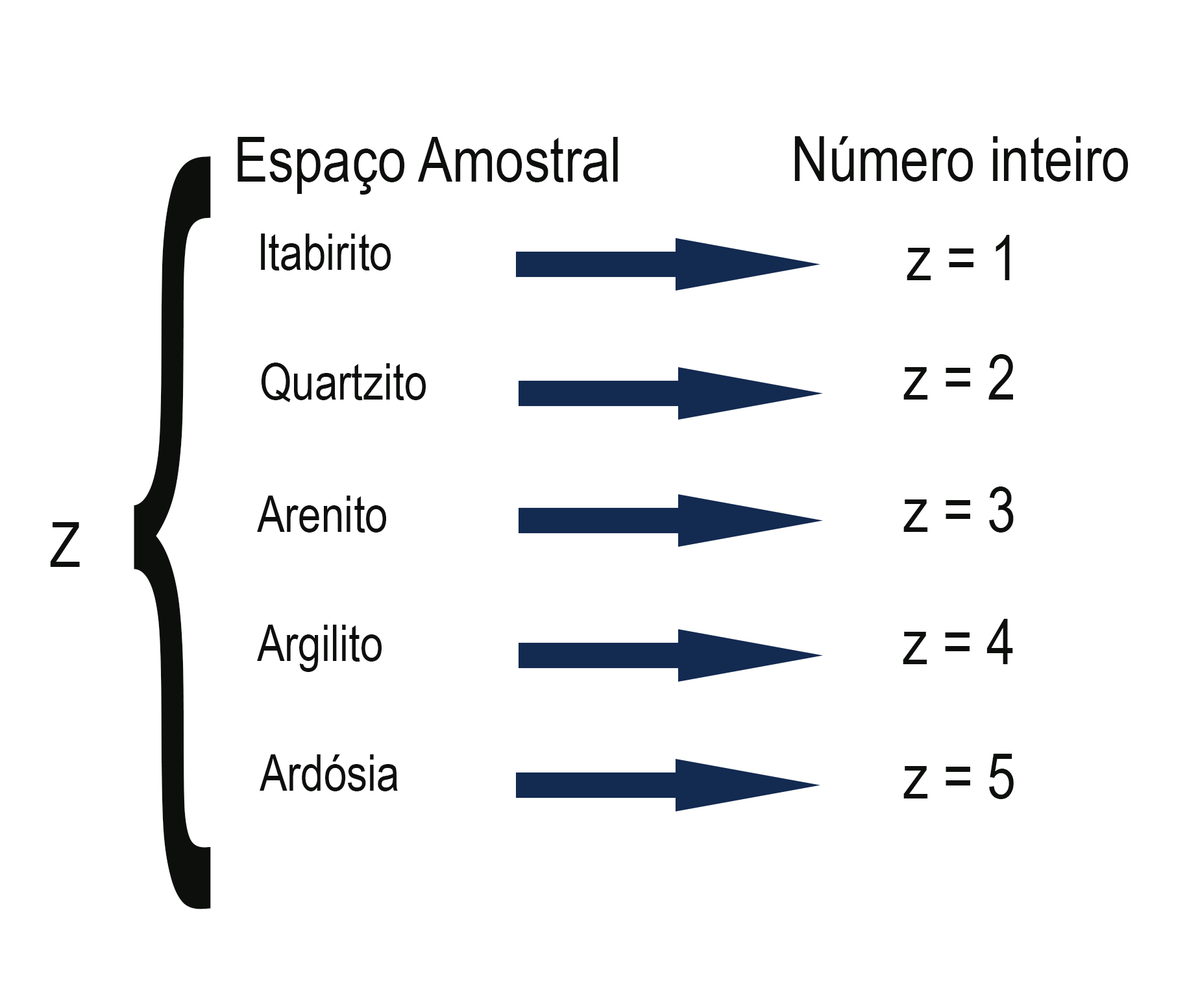
<style>
.page{position:relative;width:1198px;height:995px;background:#ffffff}
.page>*{position:absolute;margin:0}
.t1{font:108.2px "ArialNarrow";color:#0d0f0d}
.t2{font:1375.2px "ArialNarrow";color:#0d0f0d;scale:0.41 1}
.t3{font:86.5px "ArialNarrow";color:#0d0f0d}
</style>
<div class="page">
<p class="t1" style="left:238px;top:137px;width:380px;height:58px">Espaço Amostral</p>
<p class="t1" style="left:794px;top:136px;width:334px;height:46px">Número inteiro</p>
<p class="t2" style="left:134px;top:156px;width:77px;height:754px;rotate:-4deg">{</p>
<p class="t3" style="left:261px;top:234px;width:130px;height:37px">Itabirito</p>
<p class="t1" style="left:907px;top:235px;width:103px;height:45px">z = 1</p>
<p class="t3" style="left:261px;top:363px;width:165px;height:39px">Quartzito</p>
<p class="t1" style="left:903px;top:354px;width:110px;height:46px">z = 2</p>
<p class="t3" style="left:257px;top:496px;width:129px;height:37px">Arenito</p>
<p class="t1" style="left:903px;top:487px;width:111px;height:46px">z = 3</p>
<p class="t1" style="left:50px;top:522px;width:30px;height:45px">Z</p>
<p class="t3" style="left:257px;top:625px;width:125px;height:47px">Argilito</p>
<p class="t1" style="left:903px;top:619px;width:110px;height:45px">z = 4</p>
<p class="t3" style="left:260px;top:755px;width:138px;height:37px">Ardósia</p>
<p class="t1" style="left:903px;top:754px;width:111px;height:45px">z = 5</p>
</div>
